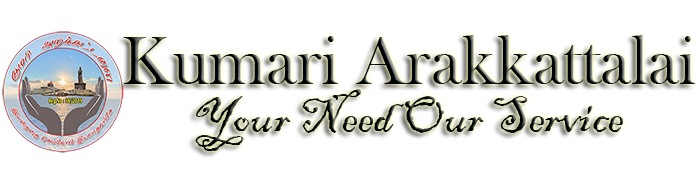
<style>
.page{position:relative;width:700px;height:181px;background:#ffffff}
.page>*{position:absolute;margin:0}
.t1{font:71.1px "BaskOldFace"}
.t2{font:51.5px "BlackadderITC-Regular";color:#000706}
</style>
<div class="page">
<p class="t1" style="left:123px;top:35px;width:572px;height:49px">Kumari Arakkattalai</p>
<p class="t2" style="left:195px;top:89px;width:429px;height:62px">Your Need Our Service</p>
</div>
